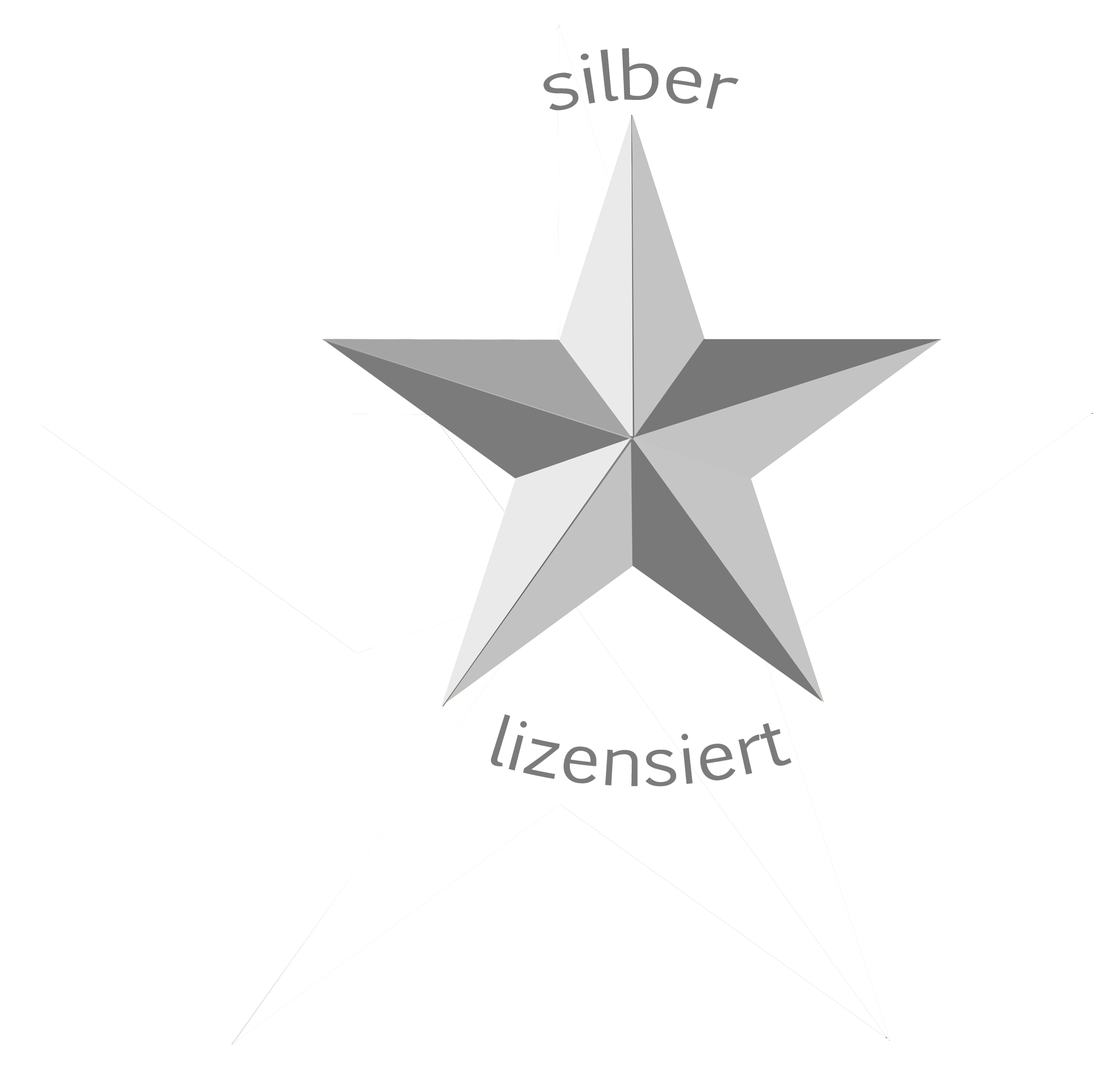
<style>
.page{position:relative;width:1116px;height:1069px;background:#ffffff}
.page>*{position:absolute;margin:0}
.t1{font:66.9px "EuphemiaCAS";color:#7b7b7b}
</style>
<div class="page">
<p class="t1" style="left:543px;top:48px;width:196px;height:62px">silber</p>
<p class="t1" style="left:490px;top:714px;width:302px;height:72px">lizensiert</p>
</div>
